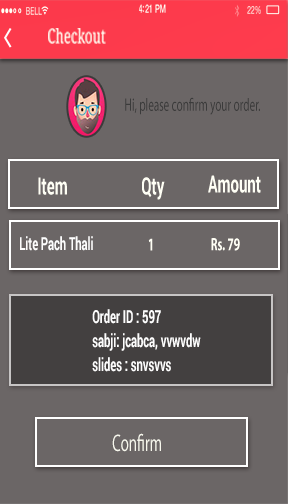
<style>
.page{position:relative;width:288px;height:504px;background:#6b6666}
.page>*{position:absolute;margin:0}
.t1{font:11.4px "HelveticaNeue-Medium";letter-spacing:-0.02em;color:#ffffff;scale:0.62 1}
.t2{font:11px "HelveticaNeue";letter-spacing:-0.02em;scale:0.62 1}
.t3{font:10.5px "HelveticaNeue";letter-spacing:0.02em;scale:0.62 1}
.t4{font:20.3px "DroidSerif";color:#fff7ee;scale:0.65 1}
.t5{font:18px "MyriadPro-Regular";color:#3b3b3b;scale:0.62 1}
.t6{font:24px "Roboto-Bold";color:#fffff5;scale:0.62 1}
.t7{font:18px "Roboto-Bold";color:#fdfdfd;scale:0.62 1}
.t8{font:18px "MyriadPro-Bold";color:#fffff5;scale:0.62 1}
.t9{font:18px "MyriadPro-Bold";color:#fffff5;scale:0.63 1}
.t10{font:18px/24px "Roboto-Bold";color:#fdfdfd;scale:0.62 1}
.t11{font:24px "MyriadPro-Regular";color:#f7f7ed;scale:0.62 1}
</style>
<div class="page">
<p class="t1" style="left:139px;top:4px;width:27px;height:9px">4:21 PM</p>
<p class="t2" style="left:247px;top:6px;width:14px;height:8px">22%</p>
<p class="t3" style="left:26px;top:7px;width:16px;height:8px">BELL</p>
<p class="t4" style="left:48px;top:28px;width:58px;height:16px">Checkout</p>
<p class="t5" style="left:125px;top:97px;width:135px;height:18px">Hi, please confirm your order.</p>
<p class="t6" style="left:38px;top:177px;width:29px;height:18px">Item</p>
<p class="t6" style="left:142px;top:177px;width:23px;height:23px">Qty</p>
<p class="t6" style="left:208px;top:175px;width:53px;height:18px">Amount</p>
<p class="t7" style="left:20px;top:236px;width:73px;height:15px">Lite Pach Thali</p>
<p class="t8" style="left:148px;top:238px;width:5px;height:13px">1</p>
<p class="t9" style="left:211px;top:238px;width:29px;height:13px">Rs. 79</p>
<p class="t10" style="left:92px;top:309px;width:109px;height:63px">Order ID : 597<br>sabji: jcabca, vvwvdw<br>slides : snvsvvs</p>
<p class="t11" style="left:112px;top:433px;width:49px;height:19px">Confirm</p>
</div>
